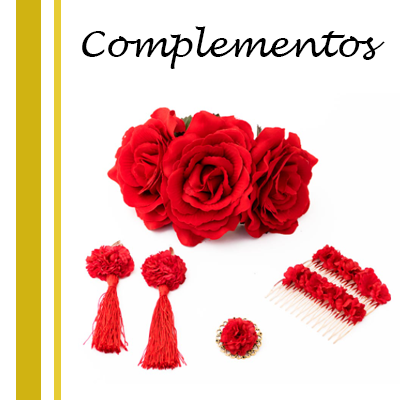
<style>
.page{position:relative;width:400px;height:400px;background:#ffffff}
.page>*{position:absolute;margin:0}
.t1{font:36.5px "LucidaHandwriting-Italic";color:#000000}
</style>
<div class="page">
<p class="t1" style="left:82px;top:26px;width:303px;height:43px">Complementos</p>
</div>
